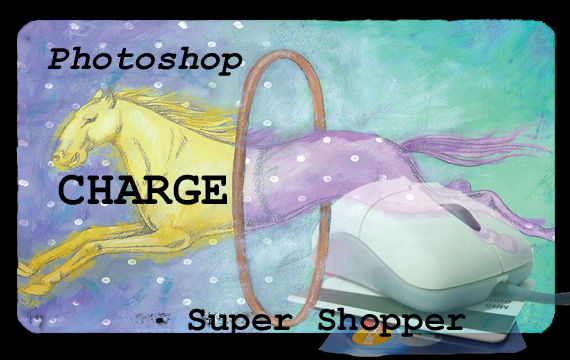
<style>
.page{position:relative;width:570px;height:360px}
.page>*{position:absolute;margin:0}
.t1{font:36px "CourierNewPS-BoldItalicMT";color:#000000}
.t2{font:48px "CourierNewPS-BoldMT";color:#000000}
.t3{font:36px "CourierNewPS-BoldMT";color:#000000}
</style>
<div class="page">
<p class="t1" style="left:47px;top:46px;width:196px;height:30px">Photoshop</p>
<p class="t2" style="left:58px;top:174px;width:169px;height:31px">CHARGE</p>
<p class="t3" style="left:188px;top:307px;width:278px;height:30px">Super Shopper</p>
</div>
